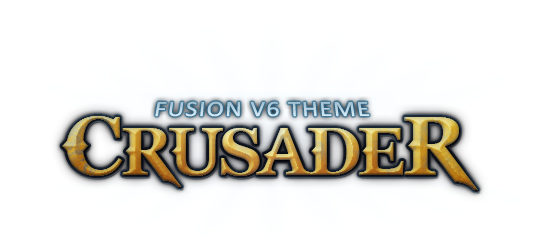
<style>
.page{position:relative;width:549px;height:250px;background:#ffffff}
.page>*{position:absolute;margin:0}
.t1{font:21.6px "Calibri";letter-spacing:0.05em;color:#bad4e3;text-transform:uppercase;scale:1.2 1}
.t2{font:92px "GodOfWar";letter-spacing:-0.05em;scale:0.9 1}
</style>
<div class="page">
<p class="t1" style="left:155px;top:101px;width:215px;height:16px">fusion v6 theme</p>
<p class="t1" style="left:155px;top:101px;width:215px;height:16px">fusion v6 theme</p>
<p class="t2" style="left:61px;top:116px;width:416px;height:74px">CrusadeR</p>
<p class="t2" style="left:62px;top:116px;width:416px;height:74px">CrusadeR</p>
<p class="t2" style="left:62px;top:116px;width:416px;height:74px">CrusadeR</p>
<p class="t2" style="left:62px;top:116px;width:416px;height:74px">CrusadeR</p>
<p class="t2" style="left:62px;top:116px;width:416px;height:74px">CrusadeR</p>
<p class="t2" style="left:62px;top:116px;width:416px;height:74px">CrusadeR</p>
<p class="t2" style="left:62px;top:116px;width:416px;height:74px">CrusadeR</p>
<p class="t2" style="left:62px;top:116px;width:416px;height:74px">CrusadeR</p>
<p class="t2" style="left:62px;top:116px;width:416px;height:74px">CrusadeR</p>
<p class="t2" style="left:62px;top:116px;width:416px;height:74px">CrusadeR</p>
<p class="t2" style="left:62px;top:116px;width:416px;height:74px">CrusadeR</p>
</div>
